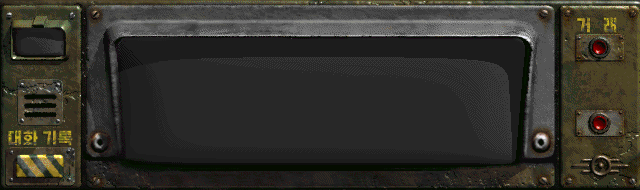
<style>
.page{position:relative;width:640px;height:190px;background:#282828}
.page>*{position:absolute;margin:0}
.t1{font:16px "HakgyoansimPosterB"}
</style>
<div class="page">
<p class="t1" style="left:577px;top:17px;width:40px;height:16px">거   래</p>
<p class="t1" style="left:8px;top:130px;width:65px;height:16px">대화 기록</p>
</div>
